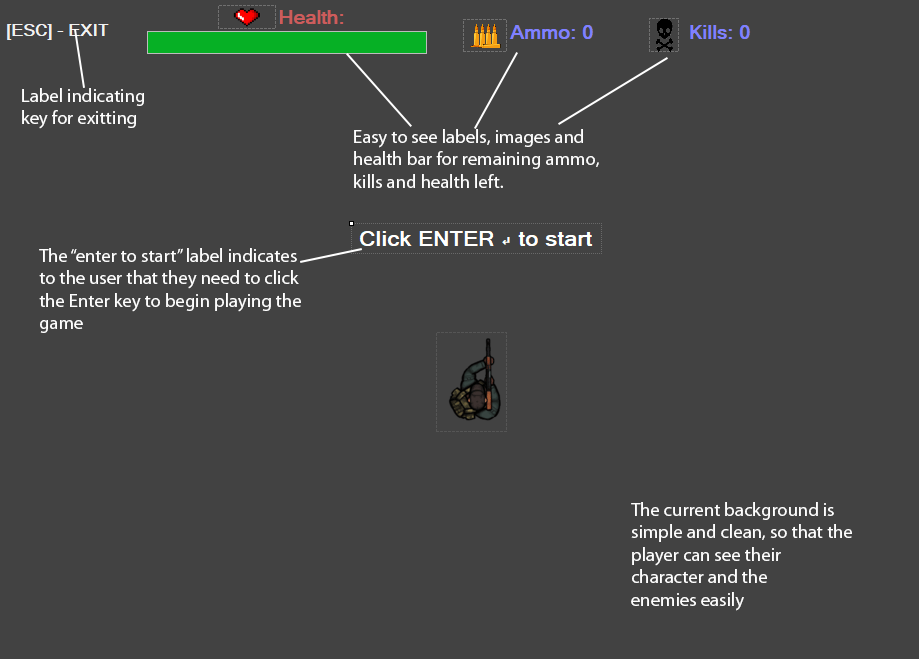
<style>
.page{position:relative;width:919px;height:659px;background:#424242}
.page>*{position:absolute;margin:0}
.t1{font:18.7px "MyriadPro-Regular";color:#fefefe}
</style>
<div class="page">
<p class="t1" style="left:22px;top:88px;width:122px;height:41px">Label indicating<br>key for exitting</p>
<p class="t1" style="left:354px;top:129px;width:245px;height:59px">Easy to see labels, images and<br>health bar for remaining ammo,<br>kills and health left.</p>
<p class="t1" style="left:39px;top:248px;width:262px;height:85px">The “enter to start” label indicates<br>to the user that they need to click <br>the Enter key to begin playing the<br>game</p>
<p class="t1" style="left:631px;top:502px;width:221px;height:109px">The current background is<br>simple and clean, so that the<br>player can see their<br>character and the<br>enemies easily</p>
</div>
